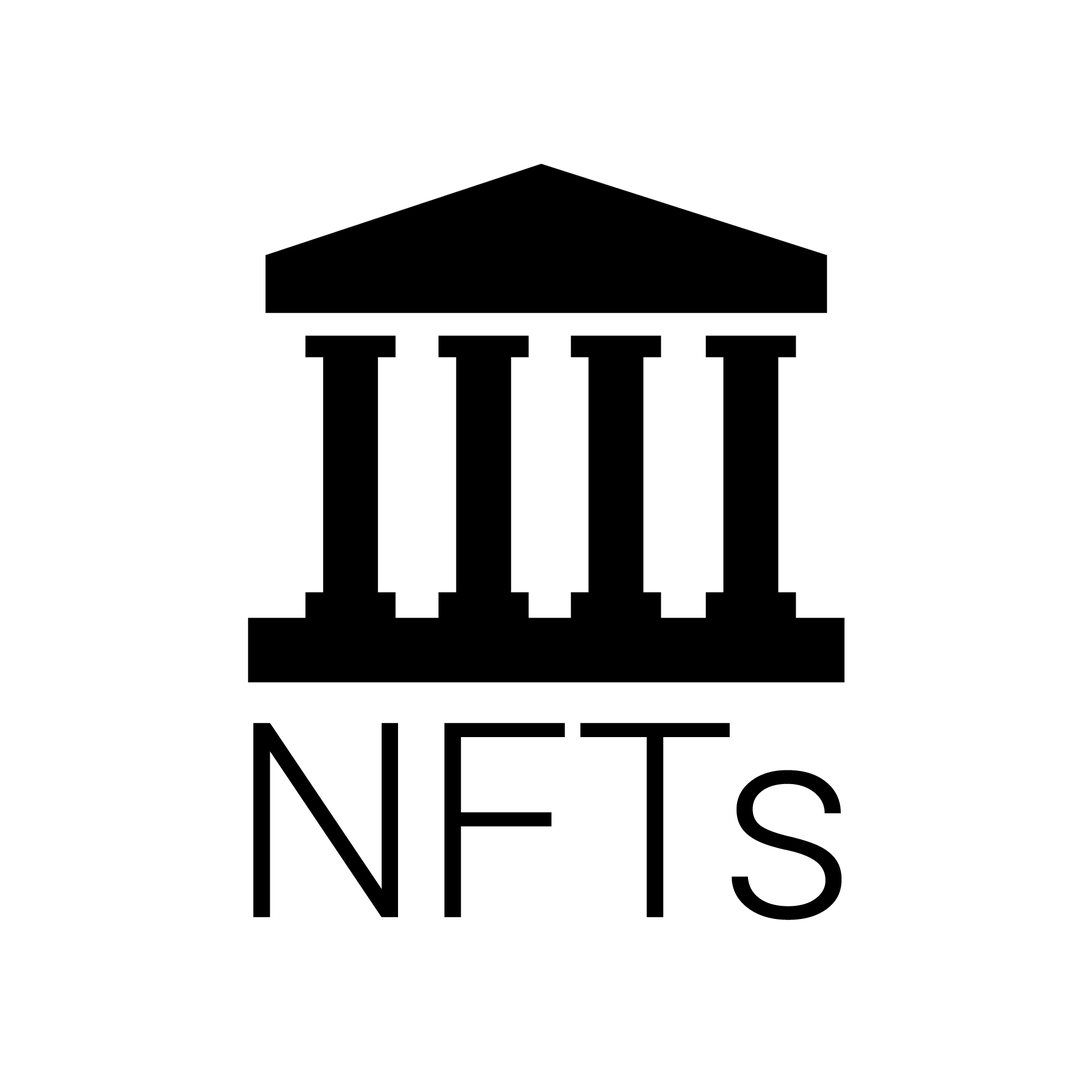
<style>
.page{position:relative;width:1092px;height:1092px;background:#ffffff}
.page>*{position:absolute;margin:0}
.t1{font:272.9px "Roboto-Light";letter-spacing:-0.01em;color:#000000}
</style>
<div class="page">
<p class="t1" style="left:253px;top:723px;width:589px;height:197px">NFTs</p>
</div>
